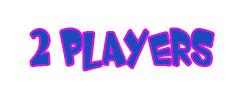
<style>
.page{position:relative;width:250px;height:100px;background:#ffffff}
.page>*{position:absolute;margin:0}
.t1{font:48px "WhimsyTT";color:#1c49bb;scale:0.8 1}
</style>
<div class="page">
<p class="t1" style="left:31px;top:29px;width:182px;height:41px">2 players</p>
</div>
